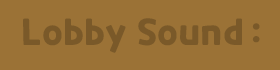
<style>
.page{position:relative;width:280px;height:70px;background:#9b7236}
.page>*{position:absolute;margin:0}
.t1{font:36px "CookieRun-Bold";color:#7a5929}
</style>
<div class="page">
<p class="t1" style="left:23px;top:18px;width:219px;height:35px">Lobby Sound</p>
<p class="t1" style="left:252px;top:23px;width:8px;height:20px">:</p>
</div>
